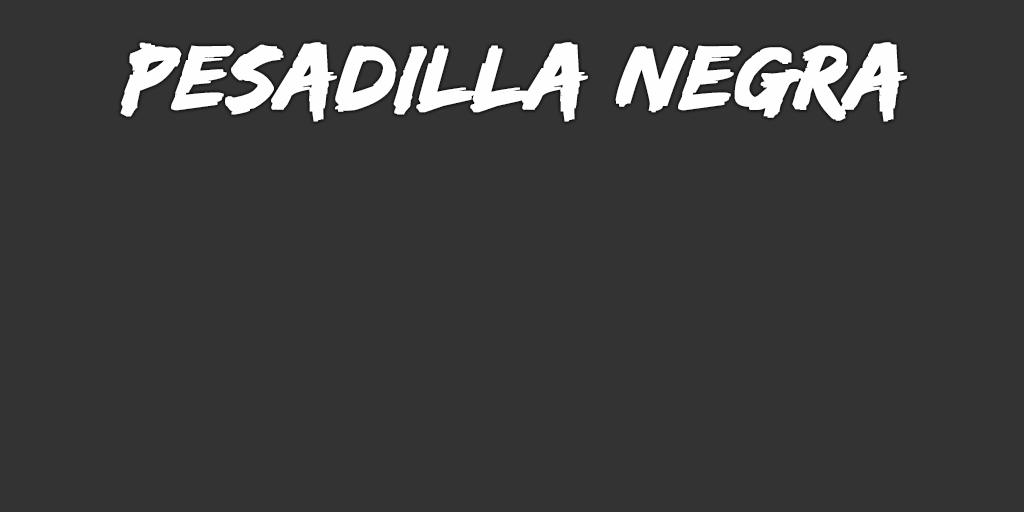
<style>
.page{position:relative;width:1024px;height:512px;background:#333333}
.page>*{position:absolute;margin:0}
.t1{font:94px "EdoSZ";color:#fefefe;font-weight:bold;font-style:italic;scale:1.04 1}
</style>
<div class="page">
<p class="t1" style="left:120px;top:42px;width:787px;height:80px">Pesadilla Negra</p>
</div>
